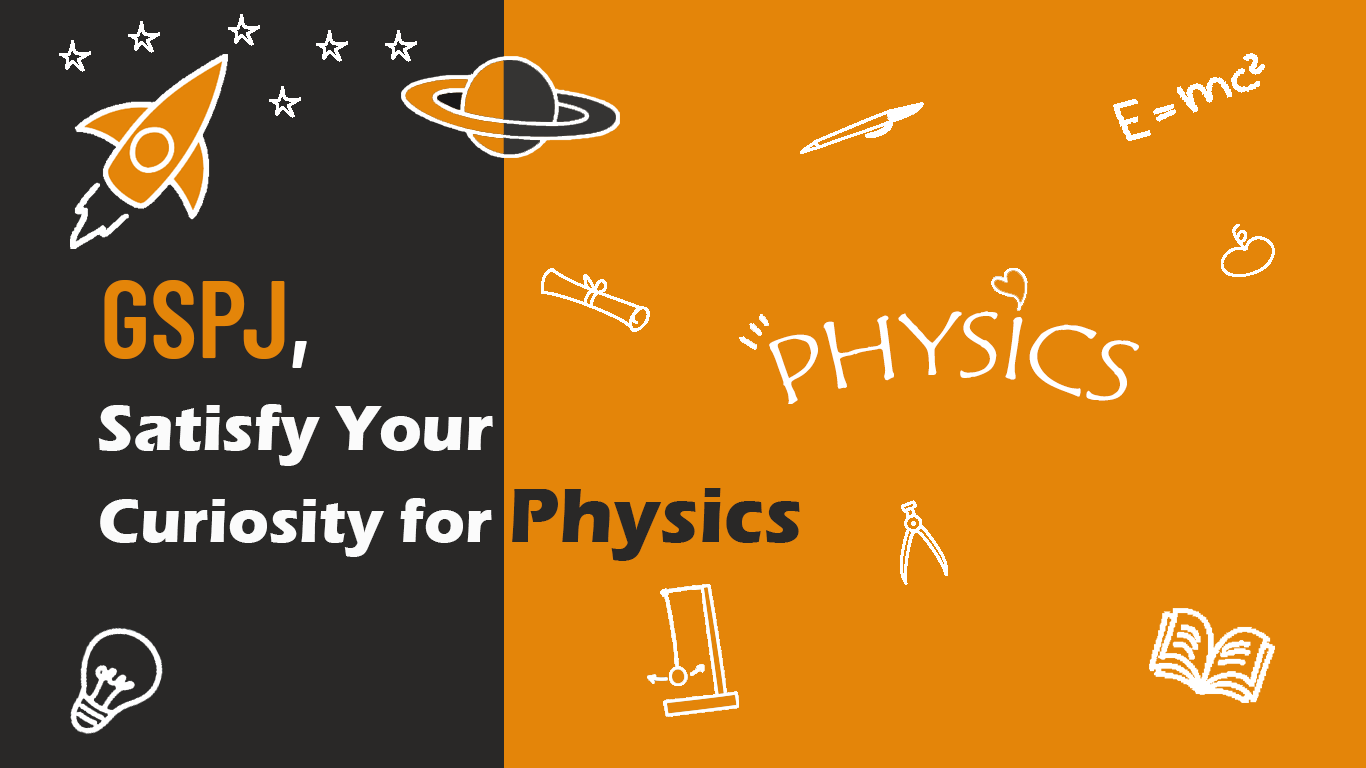
<style>
.page{position:relative;width:1366px;height:768px;background:#e48509}
.page>*{position:absolute;margin:0}
.t1{font:109px "BarlowCondensed-SemiBold";color:#e48509}
.t2{font:109px "BarlowCondensed-SemiBold";color:#ffffff}
.t3{font:93px "TempusSansITC";color:#ffffff}
.t4{font:66px "ErasITC-Bold";color:#fbfbfb}
.t5{font:63px "ErasITC-Bold";color:#fbfbfb}
.t6{font:80px "ErasITC-Bold";color:#292827}
</style>
<div class="page">
<p class="t1" style="left:104px;top:280px;width:203px;height:88px">GSPJ<span class="t2">,</span></p>
<p class="t3" style="left:769px;top:311px;width:370px;height:93px">PHYSICS</p>
<p class="t4" style="left:98px;top:404px;width:395px;height:62px">Satisfy Your</p>
<p class="t5" style="left:100px;top:488px;width:700px;height:73px">Curiosity for <span class="t6">Physics</span></p>
</div>
